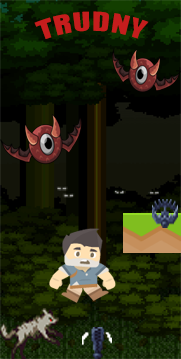
<style>
.page{position:relative;width:181px;height:359px}
.page>*{position:absolute;margin:0}
.t1{font:24px "Impact";color:#c51d1d}
</style>
<div class="page">
<p class="t1" style="left:34px;top:11px;width:115px;height:28px">TRUDNY</p>
</div>
